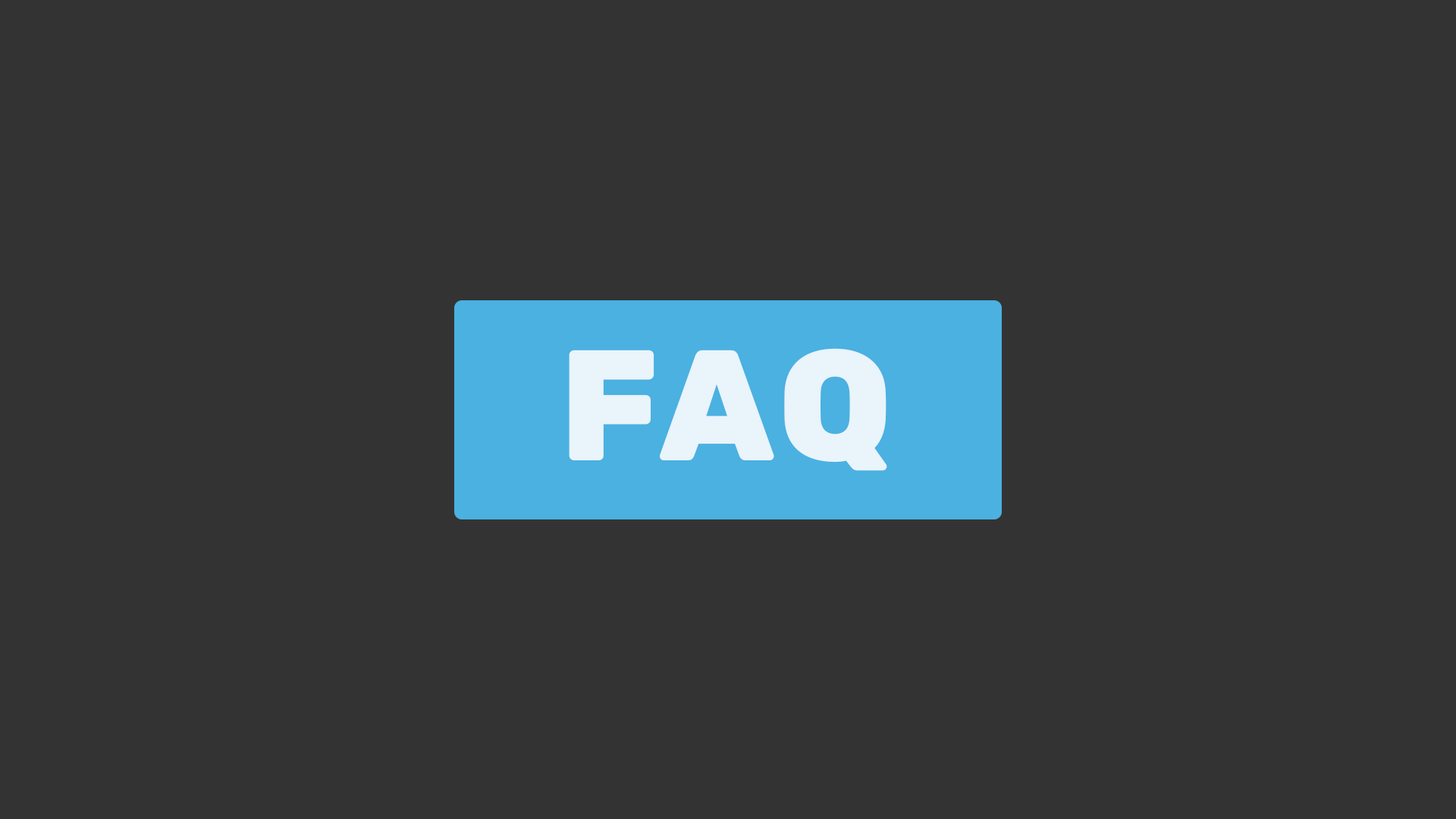
<style>
.page{position:relative;width:1456px;height:819px;background:#333333}
.page>*{position:absolute;margin:0}
.t1{font:155.1px "Rubik-ExtraBold";letter-spacing:0.02em;color:#ffffff;font-weight:bold}
</style>
<div class="page">
<p class="t1" style="left:569px;top:348px;width:318px;height:123px;opacity:0.85">FAQ</p>
</div>
